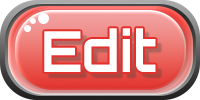
<style>
.page{position:relative;width:200px;height:100px}
.page>*{position:absolute;margin:0}
.t1{font:56.7px "Orbitron-Bold";color:#ffffff;scale:0.97 1}
</style>
<div class="page">
<p class="t1" style="left:45px;top:27px;width:112px;height:44px">Edit</p>
</div>
